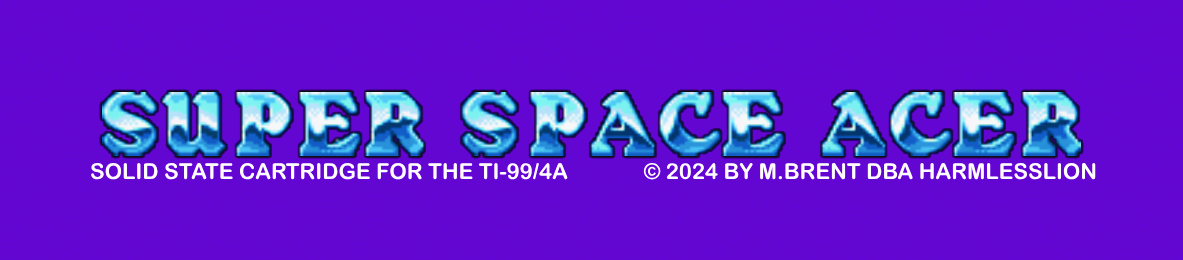
<style>
.page{position:relative;width:1183px;height:260px;background:#6306d0}
.page>*{position:absolute;margin:0}
.t1{font:22px "ArialRoundedMTBold";color:#fefefe}
</style>
<div class="page">
<p class="t1" style="left:91px;top:162px;width:477px;height:18px">SOLID STATE CARTRIDGE FOR THE TI-99/4A</p>
<p class="t1" style="left:643px;top:162px;width:453px;height:18px">© 2024 BY M.BRENT DBA HARMLESSLION</p>
</div>
